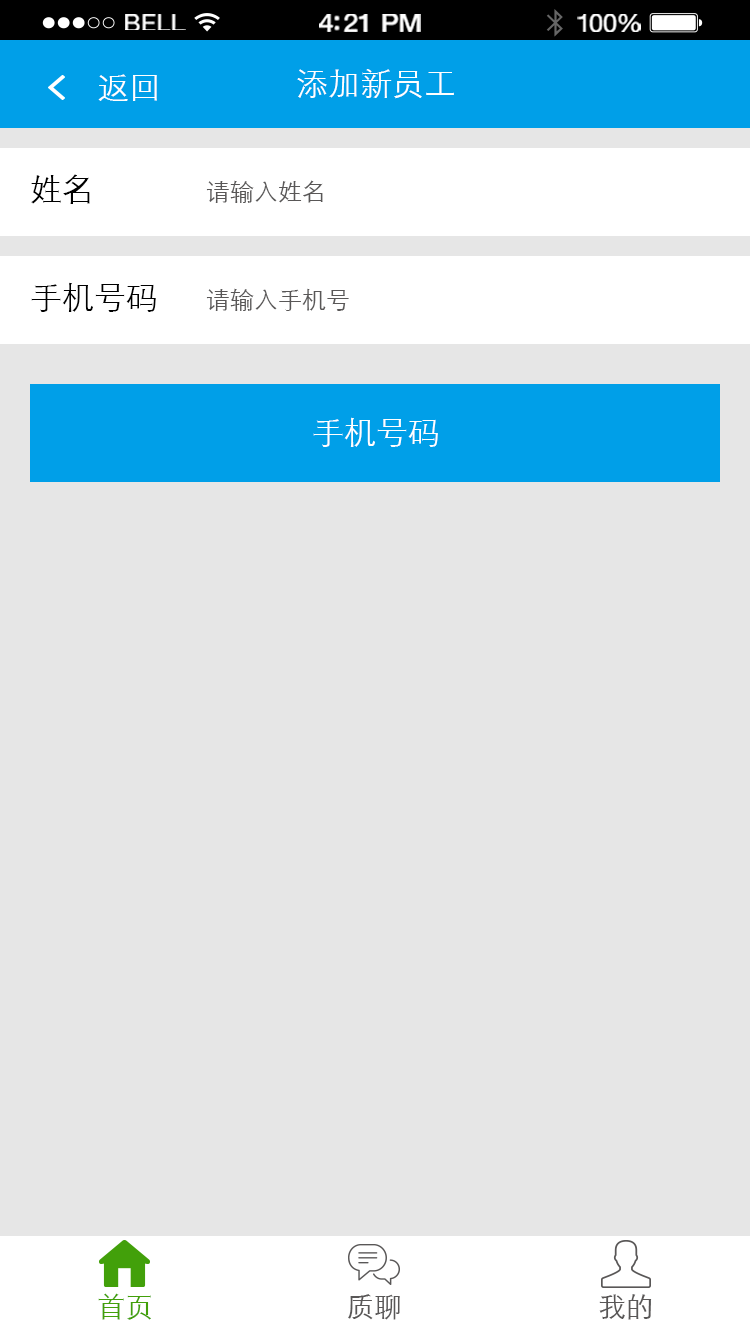
<style>
.page{position:relative;width:750px;height:1334px;background:#e6e6e6}
.page>*{position:absolute;margin:0}
.t1{font:23.3px "HelveticaNeue";letter-spacing:0.02em;color:#ffffff;scale:1.06 1}
.t2{font:25.3px "HelveticaNeue-Medium";letter-spacing:-0.02em;color:#ffffff;scale:1.06 1}
.t3{font:24.3px "HelveticaNeue";letter-spacing:-0.02em;color:#ffffff;scale:1.06 1}
.t4{font:32px "STXihei";color:#ffffff}
.t5{font:32px "STXihei";color:#000000}
.t6{font:24px "STXihei";color:#595757}
.t7{font:28px "STXihei";color:#42a00a}
.t8{font:28px "STXihei";color:#595757}
</style>
<div class="page">
<p class="t1" style="left:125px;top:14px;width:61px;height:16px">BELL</p>
<p class="t2" style="left:319px;top:14px;width:102px;height:18px">4:21 PM</p>
<p class="t3" style="left:577px;top:14px;width:64px;height:18px">100%</p>
<p class="t4" style="left:98px;top:74px;width:59px;height:27px">返回</p>
<p class="t4" style="left:297px;top:69px;width:157px;height:30px">添加新员工</p>
<p class="t5" style="left:31px;top:174px;width:59px;height:30px">姓名</p>
<p class="t6" style="left:206px;top:180px;width:117px;height:23px">请输入姓名</p>
<p class="t5" style="left:31px;top:282px;width:125px;height:30px">手机号码</p>
<p class="t6" style="left:206px;top:288px;width:143px;height:23px">请输入手机号</p>
<p class="t4" style="left:313px;top:417px;width:125px;height:30px">手机号码</p>
<p class="t7" style="left:98px;top:1293px;width:53px;height:27px">首页</p>
<p class="t8" style="left:348px;top:1294px;width:52px;height:26px">质聊</p>
<p class="t8" style="left:599px;top:1294px;width:53px;height:26px">我的</p>
</div>
